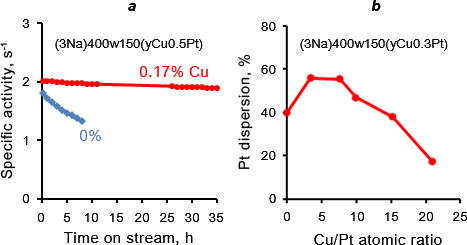
<style>
.page{position:relative;width:467px;height:245px;background:#ffffff}
.page>*{position:absolute;margin:0}
.t1{font:14.6px "Arial-BoldItalicMT";letter-spacing:0.05em;color:#000000}
.t2{font:12.5px "ArialUnicodeMS";letter-spacing:0.05em;color:#000000}
.t3{font:12.5px "ArialUnicodeMS";letter-spacing:0.025em;color:#000000}
.t4{font:14.6px "ArialUnicodeMS";letter-spacing:0.05em;color:#000000}
.t5{font:14.6px "ArialUnicodeMS";letter-spacing:0.05em;color:#ff0000}
.t6{font:14.6px "ArialUnicodeMS";letter-spacing:0.05em;color:#4f81bd}
</style>
<div class="page">
<p class="t1" style="left:128px;top:3px;width:8px;height:8px">a</p>
<p class="t1" style="left:372px;top:0px;width:9px;height:11px">b</p>
<p class="t2" style="left:22px;top:19px;width:7px;height:9px">3</p>
<p class="t2" style="left:261px;top:22px;width:15px;height:9px">80</p>
<p class="t3" style="left:55px;top:39px;width:148px;height:12px">(3Na)400w150(yCu0.5Pt)</p>
<p class="t3" style="left:300px;top:39px;width:148px;height:12px">(3Na)400w150(yCu0.3Pt)</p>
<p class="t4" style="left:0px;top:43px;width:15px;height:136px;rotate:-90deg">Specific activity, s-1</p>
<p class="t4" style="left:238px;top:54px;width:15px;height:115px;rotate:-90deg">Pt dispersion, %</p>
<p class="t2" style="left:261px;top:65px;width:15px;height:9px">60</p>
<p class="t2" style="left:22px;top:77px;width:7px;height:9px">2</p>
<p class="t5" style="left:140px;top:66px;width:68px;height:11px">0.17% Cu</p>
<p class="t2" style="left:261px;top:108px;width:15px;height:9px">40</p>
<p class="t2" style="left:23px;top:136px;width:5px;height:9px">1</p>
<p class="t6" style="left:80px;top:130px;width:21px;height:11px">0%</p>
<p class="t2" style="left:261px;top:151px;width:15px;height:9px">20</p>
<p class="t2" style="left:22px;top:194px;width:7px;height:9px">0</p>
<p class="t2" style="left:269px;top:194px;width:7px;height:9px">0</p>
<p class="t2" style="left:37px;top:213px;width:7px;height:9px">0</p>
<p class="t2" style="left:63px;top:213px;width:7px;height:9px">5</p>
<p class="t2" style="left:85px;top:213px;width:13px;height:9px">10</p>
<p class="t2" style="left:110px;top:213px;width:13px;height:9px">15</p>
<p class="t2" style="left:135px;top:213px;width:14px;height:9px">20</p>
<p class="t2" style="left:160px;top:213px;width:14px;height:9px">25</p>
<p class="t2" style="left:185px;top:213px;width:14px;height:9px">30</p>
<p class="t2" style="left:209px;top:213px;width:14px;height:9px">35</p>
<p class="t2" style="left:283px;top:212px;width:7px;height:9px">0</p>
<p class="t2" style="left:318px;top:212px;width:7px;height:9px">5</p>
<p class="t2" style="left:351px;top:212px;width:13px;height:9px">10</p>
<p class="t2" style="left:385px;top:212px;width:13px;height:9px">15</p>
<p class="t2" style="left:419px;top:212px;width:14px;height:9px">20</p>
<p class="t2" style="left:453px;top:212px;width:14px;height:9px">25</p>
<p class="t4" style="left:64px;top:232px;width:129px;height:13px">Time on stream, h</p>
<p class="t4" style="left:314px;top:234px;width:128px;height:11px">Cu/Pt atomic ratio</p>
</div>
